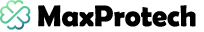
<style>
.page{position:relative;width:204px;height:32px;background:#ffffff}
.page>*{position:absolute;margin:0}
.t1{font:30px "BerlinSansFBDemi-Bold";color:#000000}
</style>
<div class="page">
<p class="t1" style="left:38px;top:5px;width:158px;height:22px">MaxProtech</p>
</div>
